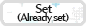
<style>
.page{position:relative;width:86px;height:26px;background:#ffffff}
.page>*{position:absolute;margin:0}
.t1{font:13.3px "AmiraParadiso";letter-spacing:-0.06em;color:#000000}
.t2{font:10.7px "AmiraParadiso";letter-spacing:-0.06em;color:#000000}
</style>
<div class="page">
<p class="t1" style="left:35px;top:4px;width:18px;height:9px;opacity:0.96">Set</p>
<p class="t2" style="left:17px;top:13px;width:52px;height:10px;opacity:0.96">(Already set)</p>
</div>
